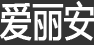
<style>
.page{position:relative;width:94px;height:45px;background:#333333}
.page>*{position:absolute;margin:0}
.t1{font:40.4px "MicrosoftYaHei";color:#ffffff;font-weight:bold;scale:0.76 1}
</style>
<div class="page">
<p class="t1" style="left:0px;top:1px;width:95px;height:40px">爱丽安</p>
</div>
